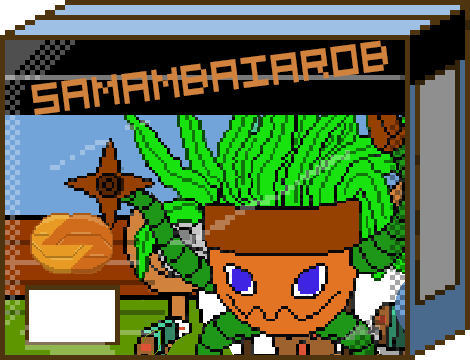
<style>
.page{position:relative;width:470px;height:360px}
.page>*{position:absolute;margin:0}
.t1{font:48px "5x5-Pixel";color:#d1833d;scale:0.84 1}
</style>
<div class="page">
<p class="t1" style="left:31px;top:40px;width:358px;height:75px;rotate:-7deg">SAMAMBAIAROB</p>
</div>
